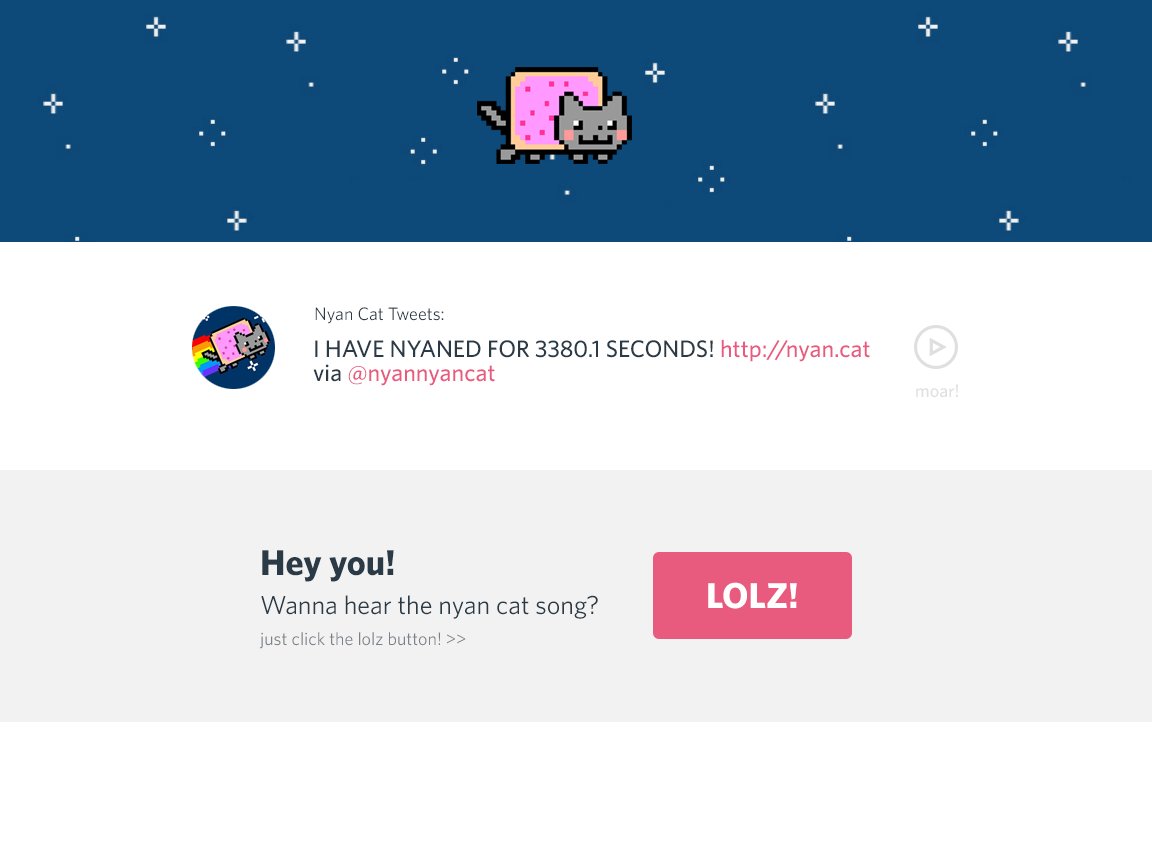
<style>
.page{position:relative;width:1152px;height:864px;background:#ffffff}
.page>*{position:absolute;margin:0}
.t1{font:18px "Whitney-Book";color:#2a3a46}
.t2{font:24px/24px "Whitney-Medium";color:#2a3a46}
.t3{font:24px/24px "Whitney-Medium";color:#e95a7f}
.t4{font:18px "Whitney-Medium";color:#cecece}
.t5{font:36px "Whitney-Bold";color:#2a3a46}
.t6{font:36px "Whitney-Bold";color:#ffffff}
.t7{font:26px "Whitney-Book";color:#2a3a46}
.t8{font:18px "Whitney-Book";color:#7b8287}
</style>
<div class="page">
<p class="t1" style="left:315px;top:307px;width:129px;height:17px">Nyan Cat Tweets:</p>
<p class="t2" style="left:313px;top:339px;width:557px;height:47px">I HAVE NYANED FOR 3380.1 SECONDS! <span class="t3">http://nyan.cat<br></span>via <span class="t3">@nyannyancat</span></p>
<p class="t4" style="left:916px;top:384px;width:42px;height:14px;opacity:0.65">moar!</p>
<p class="t5" style="left:262px;top:550px;width:132px;height:32px">Hey you!</p>
<p class="t6" style="left:708px;top:582px;width:89px;height:27px">LOLZ!</p>
<p class="t7" style="left:261px;top:595px;width:337px;height:24px">Wanna hear the nyan cat song?</p>
<p class="t8" style="left:259px;top:632px;width:207px;height:17px">just click the lolz button! &gt;&gt;</p>
</div>
